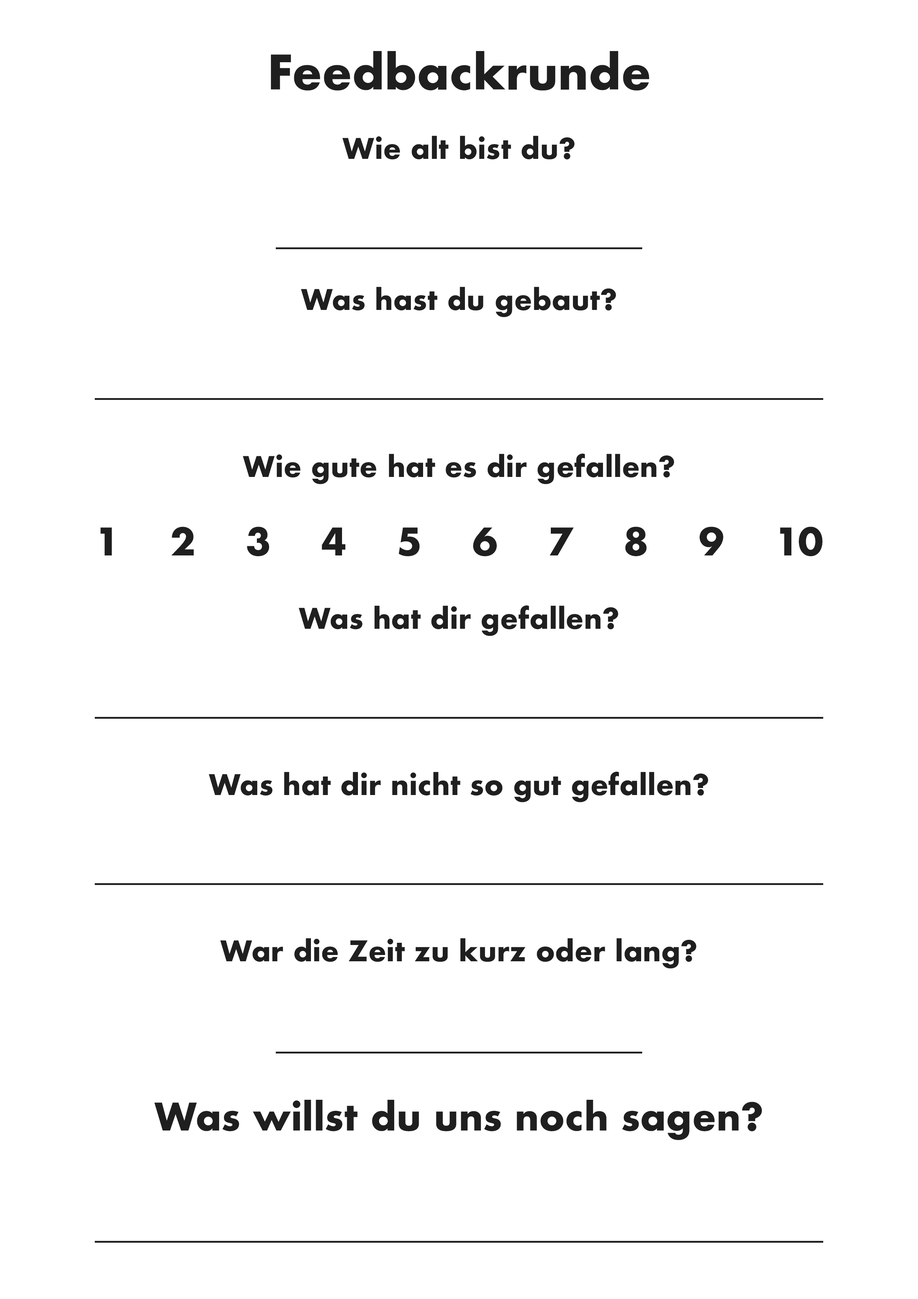
<style>
.page{position:relative;width:918px;height:1299px;background:#ffffff}
.page>*{position:absolute;margin:0}
.t1{font:46.3px "Futura-Bold";color:#1f1f1f}
.t2{font:27.8px "Futura-Bold";color:#1f1f1f}
.t3{font:37px "Futura-Bold";color:#1f1f1f}
</style>
<div class="page">
<p class="t1" style="left:271px;top:51px;width:378px;height:40px">Feedbackrunde</p>
<p class="t2" style="left:342px;top:136px;width:233px;height:24px">Wie alt bist du?</p>
<p class="t2" style="left:301px;top:287px;width:315px;height:30px">Was hast du gebaut?</p>
<p class="t2" style="left:243px;top:454px;width:431px;height:30px">Wie gute hat es dir gefallen?</p>
<p class="t3" style="left:100px;top:526px;width:723px;height:30px">1    2    3    4    5    6    7    8    9    10</p>
<p class="t2" style="left:299px;top:605px;width:319px;height:31px">Was hat dir gefallen?</p>
<p class="t2" style="left:209px;top:772px;width:499px;height:30px">Was hat dir nicht so gut gefallen?</p>
<p class="t2" style="left:220px;top:938px;width:476px;height:30px">War die Zeit zu kurz oder lang?</p>
<p class="t3" style="left:154px;top:1100px;width:608px;height:40px">Was willst du uns noch sagen?</p>
</div>
